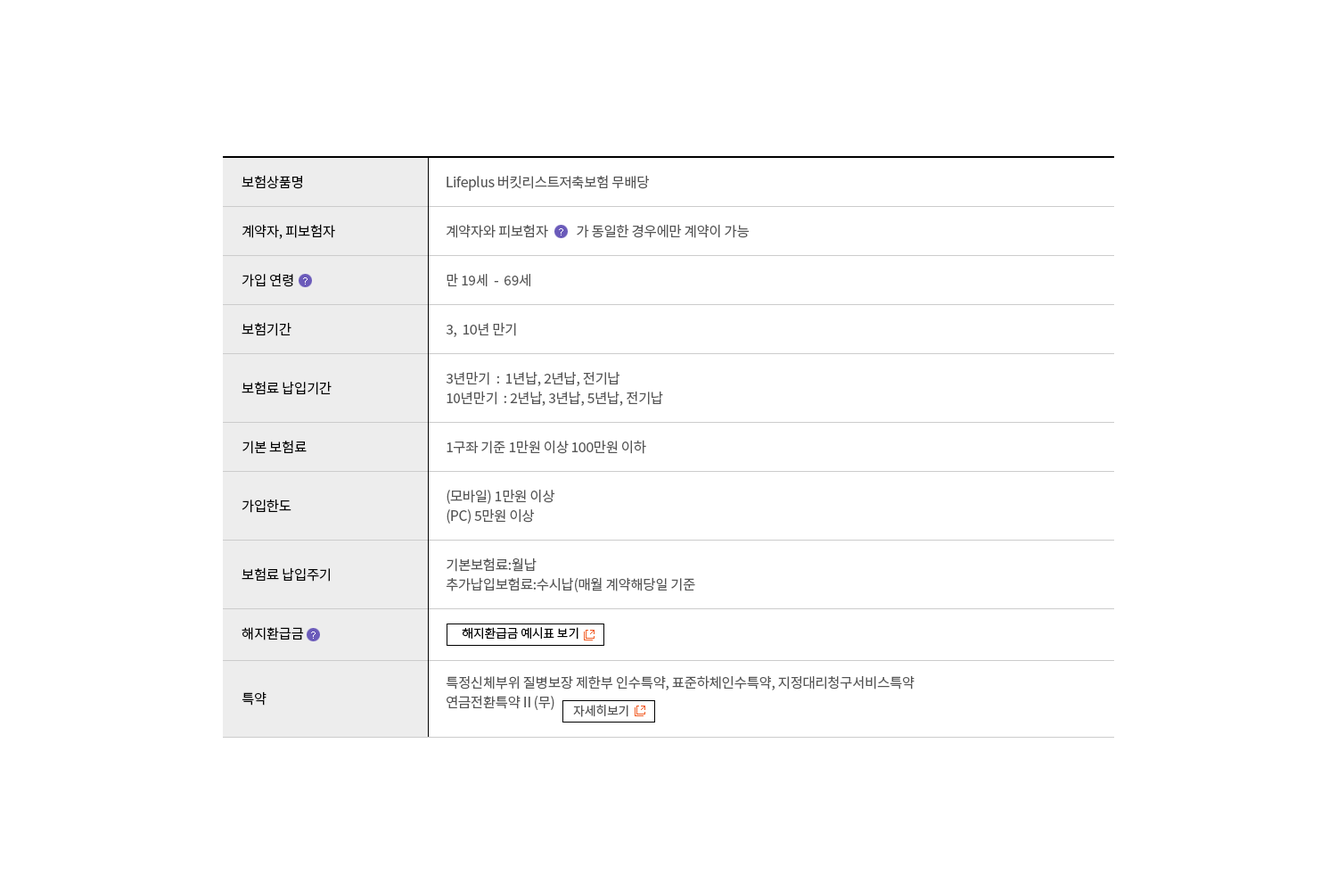
<style>
.page{position:relative;width:1337px;height:892px;background:#ffffff}
.page>*{position:absolute;margin:0}
.t1{font:13.8px/49px "NotoSansKR-Regular";letter-spacing:-0.02em;color:#000000}
.t2{font:13.8px/58.8px "NotoSansKR-Regular";letter-spacing:-0.02em;color:#000000}
.t3{font:13.8px/68.7px "NotoSansKR-Regular";letter-spacing:-0.02em;color:#000000}
.t4{font:13.8px/65.1px "NotoSansKR-Regular";letter-spacing:-0.02em;color:#000000}
.t5{font:13.8px/49px "NotoSansKR-Regular";letter-spacing:-0.02em;color:#555555}
.t6{font:13.8px/19.6px "NotoSansKR-Regular";letter-spacing:-0.02em;color:#555555}
.t7{font:12.5px "NotoSansKR-Regular";letter-spacing:-0.02em;color:#000000}
.t8{font:12.5px "NotoSansKR-Regular";letter-spacing:-0.02em;color:#555555}
</style>
<div class="page">
<p class="t1" style="left:242px;top:175px;width:93px;height:530px">보험상품명<br>계약자, 피보험자<br>가입 연령<br><span class="t2">보험기간<br>보험료 납입기간<br>기본 보험료<br></span><span class="t3">가입한도<br></span><span class="t2">보험료 납입주기<br></span><span class="t4">해지환급금<br></span>특약</p>
<p class="t5" style="left:446px;top:175px;width:469px;height:535px">Lifeplus 버킷리스트저축보험 무배당<br>계약자와 피보험자          가 동일한 경우에만 계약이 가능<br>만 19세  -  69세<br>3,  10년 만기<br><span class="t6">3년만기  :  1년납, 2년납, 전기납<br></span>10년만기  : 2년납, 3년납, 5년납, 전기납<br>1구좌 기준 1만원 이상 100만원 이하<br><span class="t6">(모바일) 1만원 이상<br></span>(PC) 5만원 이상<br><span class="t6">기본보험료:월납<br></span>추가납입보험료:수시납(매월 계약해당일 기준<br><br><span class="t6">특정신체부위 질병보장 제한부 인수특약, 표준하체인수특약, 지정대리청구서비스특약<br></span>연금전환특약Ⅱ(무)</p>
<p class="t7" style="left:462px;top:627px;width:117px;height:12px">해지환급금 예시표 보기</p>
<p class="t8" style="left:573px;top:704px;width:56px;height:13px">자세히보기</p>
</div>
